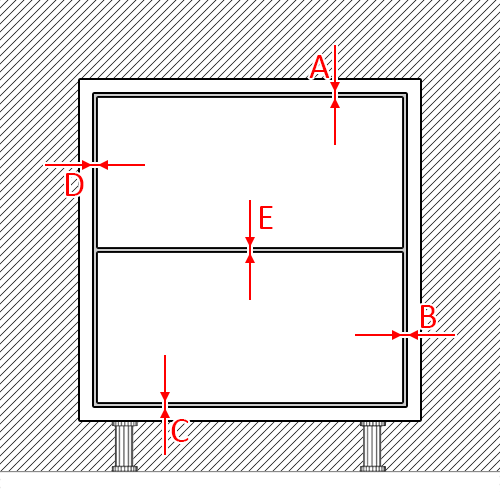
<style>
.page{position:relative;width:500px;height:500px;background:#ffffff}
.page>*{position:absolute;margin:0}
.t1{font:36px "Calibri";color:#ff0000}
</style>
<div class="page">
<p class="t1" style="left:309px;top:55px;width:21px;height:23px">A</p>
<p class="t1" style="left:66px;top:173px;width:18px;height:23px">D</p>
<p class="t1" style="left:260px;top:206px;width:13px;height:23px">E</p>
<p class="t1" style="left:421px;top:305px;width:15px;height:23px">B</p>
<p class="t1" style="left:171px;top:419px;width:18px;height:23px">C</p>
</div>
